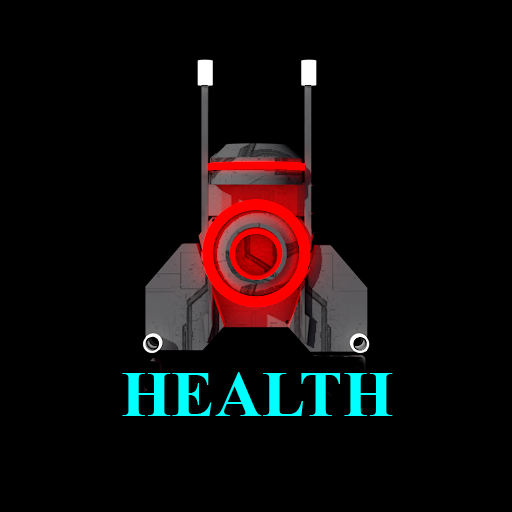
<style>
.page{position:relative;width:512px;height:512px;background:#000000}
.page>*{position:absolute;margin:0}
.t1{font:65px "TimesNewRomanPS-BoldMT";color:#00ffff}
</style>
<div class="page">
<p class="t1" style="left:122px;top:372px;width:271px;height:44px">HEALTH</p>
</div>
